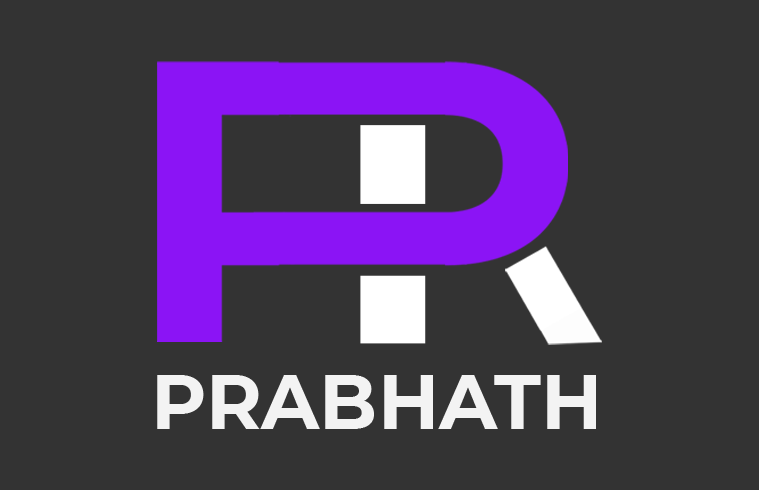
<style>
.page{position:relative;width:759px;height:490px;background:#333333}
.page>*{position:absolute;margin:0}
.t1{font:75.9px "Montserrat-Bold";color:#f3f3f3}
</style>
<div class="page">
<p class="t1" style="left:157px;top:375px;width:439px;height:54px">PRABHATH</p>
</div>
